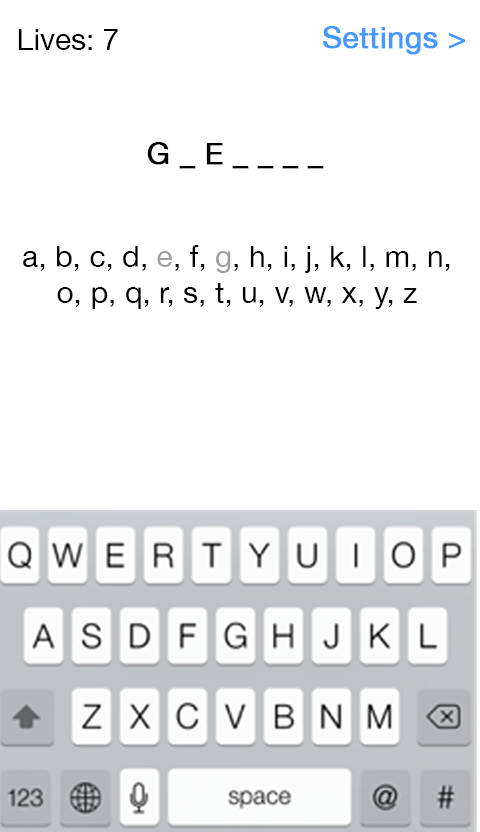
<style>
.page{position:relative;width:480px;height:832px;background:#ffffff}
.page>*{position:absolute;margin:0}
.t1{font:30px "HelveticaNeue";color:#000000}
.t2{font:30px "HelveticaNeue";color:#4598ff;font-weight:bold}
.t3{font:30px "HelveticaNeue";color:#000000;font-weight:bold}
.t4{font:30px "HelveticaNeue";color:#9d9d9d}
</style>
<div class="page">
<p class="t1" style="left:18px;top:29px;width:100px;height:21px">Lives: 7</p>
<p class="t2" style="left:323px;top:26px;width:142px;height:29px">Settings &gt;</p>
<p class="t3" style="left:147px;top:142px;width:177px;height:27px">G _ E _ _ _ _</p>
<p class="t1" style="left:23px;top:245px;width:427px;height:64px;text-align:center">a, b, c, d, <span class="t4">e</span>, f, <span class="t4">g</span>, h, i, j, k, l, m, n, o, p, q, r, s, t, u, v, w, x, y, z</p>
</div>
